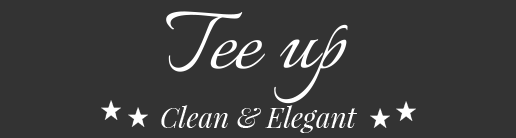
<style>
.page{position:relative;width:516px;height:138px;background:#333333}
.page>*{position:absolute;margin:0}
.t1{font:102px "Italianno-Regular";color:#ffffff}
.t2{font:28px "PlayfairDisplay-Italic";color:#ffffff}
</style>
<div class="page">
<p class="t1" style="left:166px;top:11px;width:182px;height:93px">Tee up</p>
<p class="t2" style="left:161px;top:105px;width:196px;height:28px">Clean &amp; Elegant</p>
</div>
